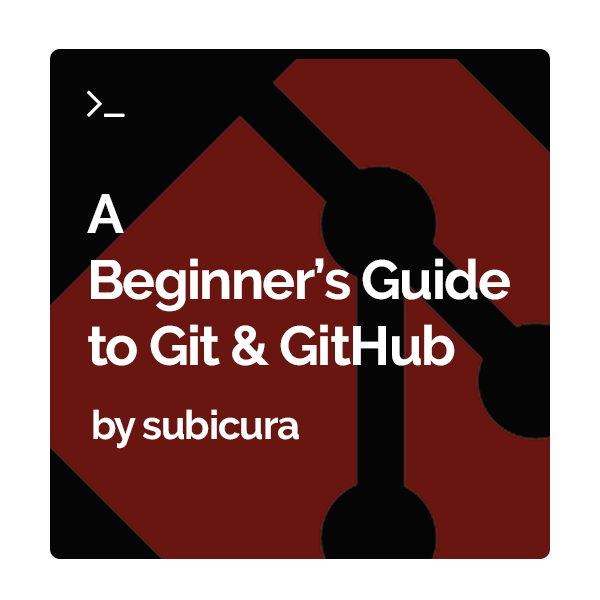
<style>
.page{position:relative;width:600px;height:600px;background:#ffffff}
.page>*{position:absolute;margin:0}
.t1{font:55px "Raleway-Bold";letter-spacing:-0.03em;color:#ffffff}
.t2{font:40px "Raleway-Bold";letter-spacing:-0.03em;color:#ffffff}
</style>
<div class="page">
<p class="t1" style="left:87px;top:194px;width:423px;height:172px">A<br>Beginner’s Guide<br>to Git &amp; GitHub</p>
<p class="t2" style="left:93px;top:409px;width:206px;height:40px">by subicura</p>
</div>
